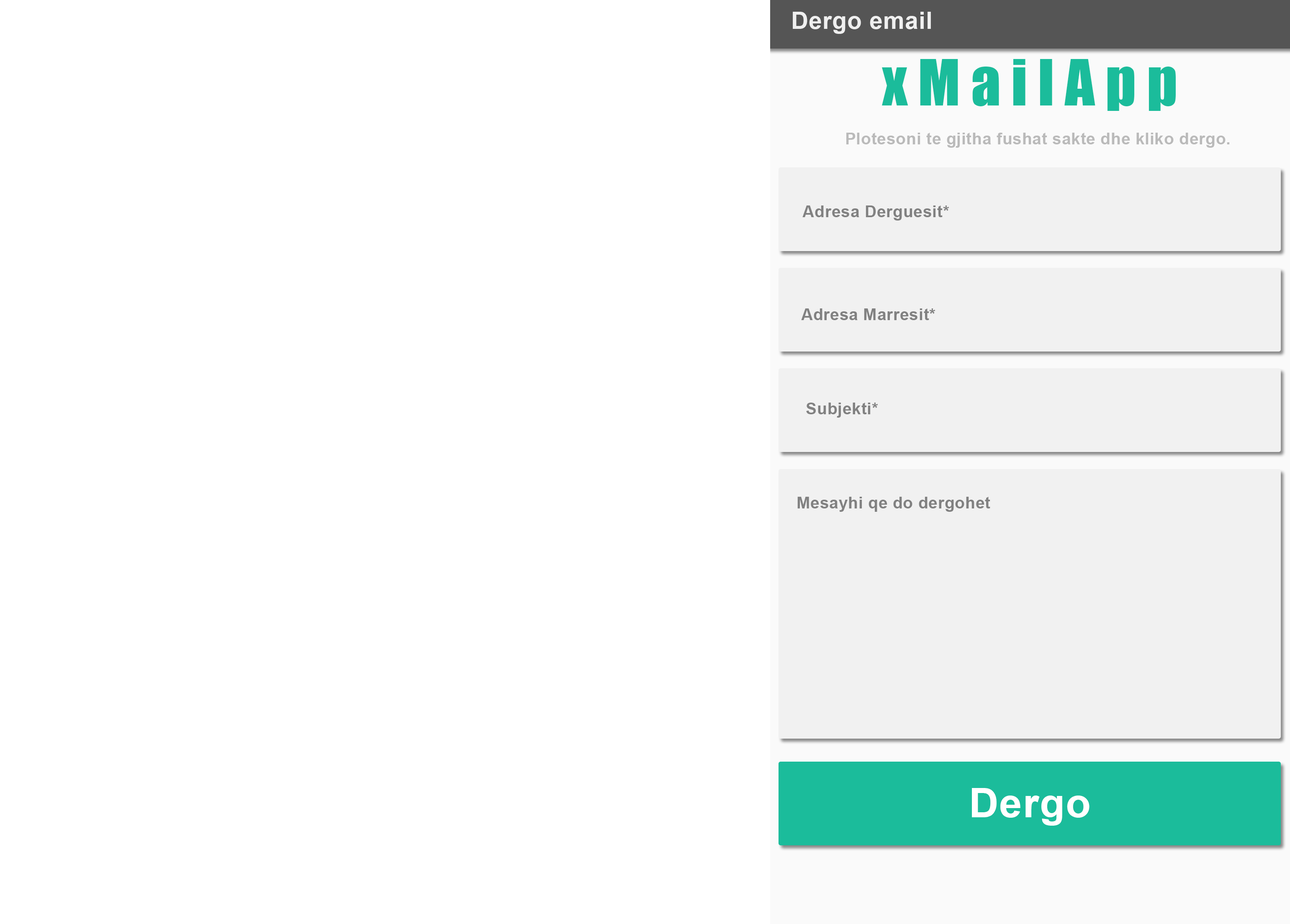
<style>
.page{position:relative;width:1290px;height:924px;background:#ffffff}
.page>*{position:absolute;margin:0}
.t1{font:23.9px "Arial-BoldMT";letter-spacing:0.02em;color:#efefef}
.t2{font:59px "Impact";letter-spacing:0.18em;color:#1bbc9b}
.t3{font:16.3px "Arial-BoldMT";letter-spacing:0.02em;color:#bababa}
.t4{font:16.3px "Arial-BoldMT";letter-spacing:0.02em;color:#818181}
.t5{font:41px "Arial-BoldMT";letter-spacing:0.02em;color:#ffffff}
</style>
<div class="page">
<p class="t1" style="left:793px;top:12px;width:138px;height:22px">Dergo email</p>
<p class="t2" style="left:882px;top:59px;width:294px;height:52px">xMailApp</p>
<p class="t3" style="left:846px;top:133px;width:384px;height:15px">Plotesoni te gjitha fushat sakte dhe kliko dergo.</p>
<p class="t4" style="left:802px;top:206px;width:147px;height:15px">Adresa Derguesit*</p>
<p class="t4" style="left:801px;top:309px;width:135px;height:11px">Adresa Marresit*</p>
<p class="t4" style="left:806px;top:403px;width:72px;height:15px">Subjekti*</p>
<p class="t4" style="left:797px;top:497px;width:193px;height:15px">Mesayhi qe do dergohet</p>
<p class="t5" style="left:972px;top:788px;width:118px;height:38px">Dergo</p>
</div>
